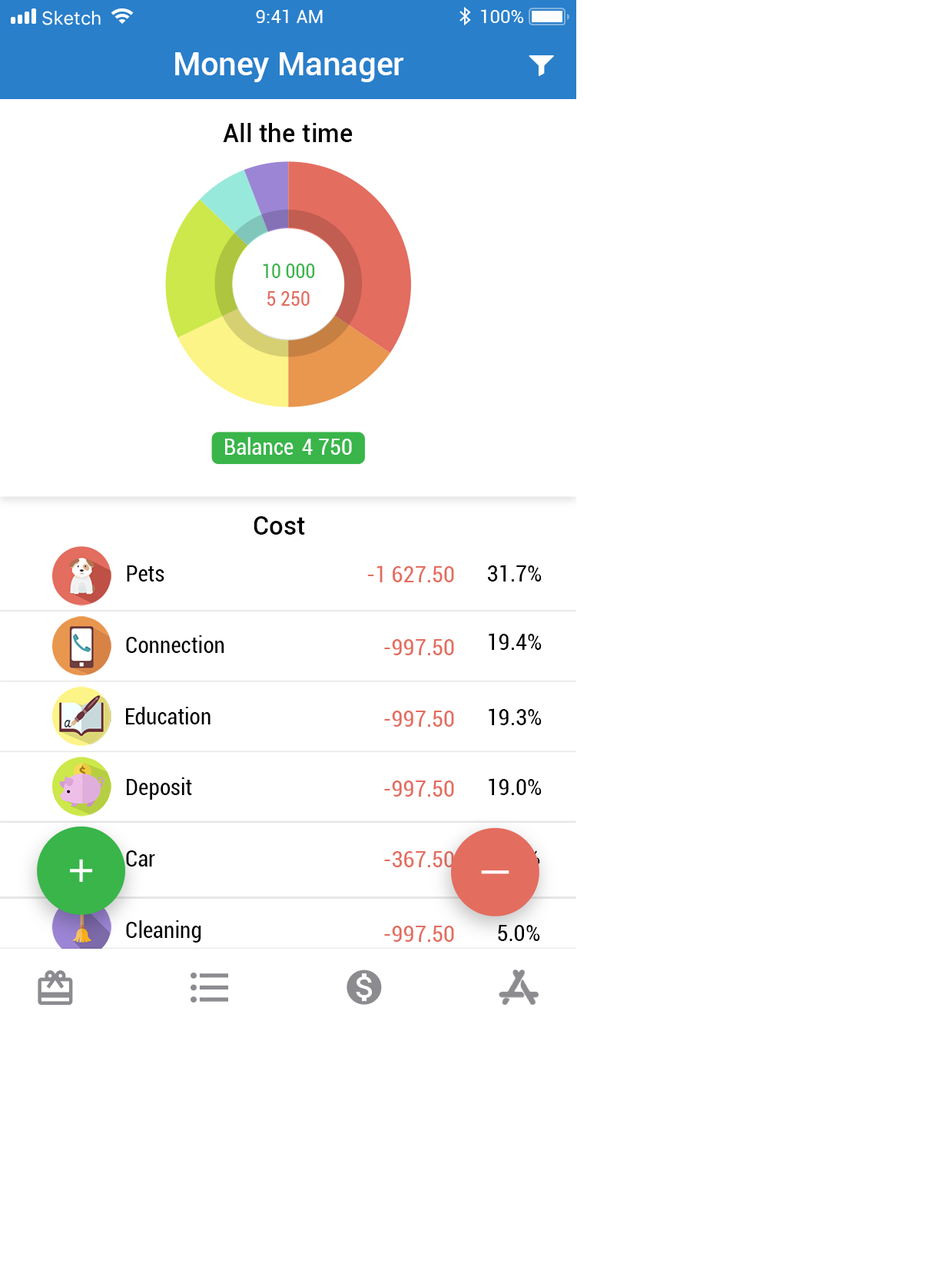
<style>
.page{position:relative;width:942px;height:1266px;background:#ffffff}
.page>*{position:absolute;margin:0}
.t1{font:32px "Roboto-Medium";color:#ffffff}
.t2{font:25.7px "Roboto-Medium";color:#000000}
.t3{font:19.2px "Roboto-Condensed";color:#39b54a}
.t4{font:19.2px "Roboto-Condensed";color:#e36d5f}
.t5{font:22.4px "Roboto-Condensed";color:#ffffff}
.t6{font:25.6px "Roboto-Medium";color:#000000}
.t7{font:22.4px "Roboto-Condensed";color:#000000}
.t8{font:22.4px "Roboto-Condensed";color:#e36d5f}
</style>
<div class="page">
<p class="t1" style="left:175px;top:52px;width:229px;height:30px">Money Manager</p>
<p class="t2" style="left:223px;top:123px;width:130px;height:19px">All the time</p>
<p class="t3" style="left:263px;top:264px;width:52px;height:14px">10 000</p>
<p class="t4" style="left:267px;top:291px;width:43px;height:15px">5 250</p>
<p class="t5" style="left:225px;top:437px;width:68px;height:18px">Balance</p>
<p class="t5" style="left:302px;top:439px;width:50px;height:16px">4 750</p>
<p class="t6" style="left:254px;top:516px;width:51px;height:19px">Сost</p>
<p class="t7" style="left:127px;top:565px;width:37px;height:17px">Pets</p>
<p class="t8" style="left:367px;top:565px;width:87px;height:17px">-1 627.50</p>
<p class="t7" style="left:487px;top:565px;width:55px;height:17px">31.7%</p>
<p class="t7" style="left:126px;top:635px;width:98px;height:18px">Connection</p>
<p class="t8" style="left:384px;top:639px;width:70px;height:16px">-997.50</p>
<p class="t7" style="left:489px;top:633px;width:53px;height:17px">19.4%</p>
<p class="t7" style="left:126px;top:707px;width:84px;height:17px">Education</p>
<p class="t8" style="left:384px;top:711px;width:70px;height:16px">-997.50</p>
<p class="t7" style="left:489px;top:708px;width:53px;height:17px">19.3%</p>
<p class="t7" style="left:127px;top:777px;width:65px;height:23px">Deposit</p>
<p class="t8" style="left:384px;top:781px;width:70px;height:16px">-997.50</p>
<p class="t7" style="left:489px;top:778px;width:53px;height:17px">19.0%</p>
<p class="t7" style="left:126px;top:850px;width:29px;height:17px">Car</p>
<p class="t8" style="left:384px;top:851px;width:70px;height:16px">-367.50</p>
<p class="t7" style="left:126px;top:920px;width:75px;height:23px">Cleaning</p>
<p class="t8" style="left:384px;top:926px;width:70px;height:16px">-997.50</p>
<p class="t7" style="left:498px;top:925px;width:42px;height:16px">5.0%</p>
</div>
